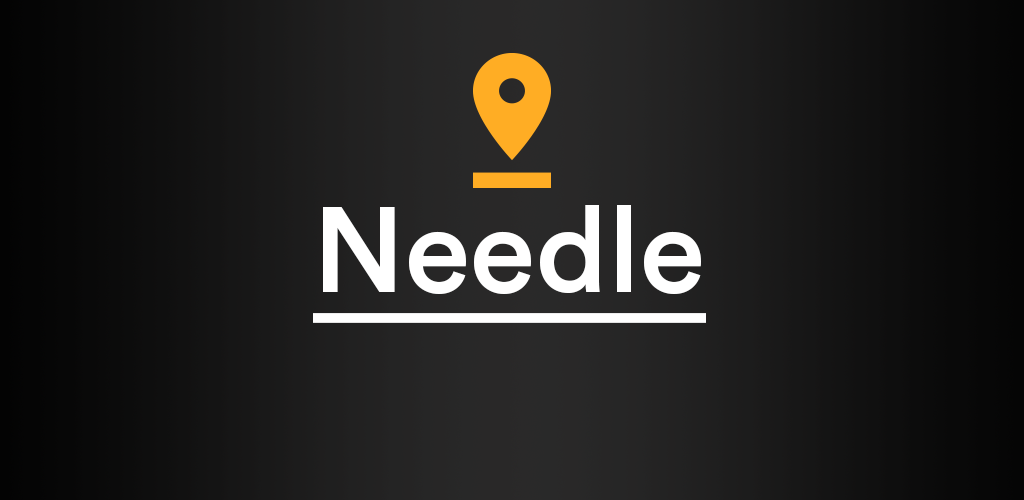
<style>
.page{position:relative;width:1024px;height:500px}
.page>*{position:absolute;margin:0}
.t1{font:120px "CircularStd-Medium";color:#ffffff;text-decoration:underline}
</style>
<div class="page">
<p class="t1" style="left:313px;top:205px;width:393px;height:118px">Needle</p>
</div>
